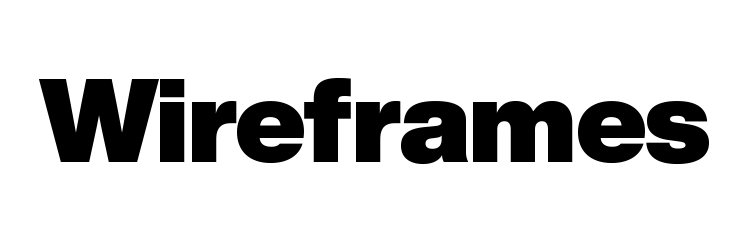
<style>
.page{position:relative;width:748px;height:241px;background:#ffffff}
.page>*{position:absolute;margin:0}
.t1{font:116.7px "HelveticaNowDisplay-XBlk";letter-spacing:-0.01em;color:#000000}
</style>
<div class="page">
<p class="t1" style="left:38px;top:78px;width:671px;height:87px">Wireframes</p>
</div>
